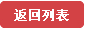
<style>
.page{position:relative;width:85px;height:29px;background:#d34245}
.page>*{position:absolute;margin:0}
.t1{font:13px "SimSun";color:#ffffff;font-weight:bold}
</style>
<div class="page">
<p class="t1" style="left:14px;top:9px;width:55px;height:12px">返回列表</p>
</div>
